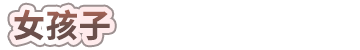
<style>
.page{position:relative;width:360px;height:50px;background:#ffffff}
.page>*{position:absolute;margin:0}
.t1{font:32px "SourceHanSansSC-Bold";font-weight:bold}
</style>
<div class="page">
<p class="t1" style="left:14px;top:9px;width:96px;height:32px">女孩子</p>
</div>
